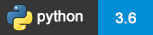
<style>
.page{position:relative;width:153px;height:35px;background:#363636}
.page>*{position:absolute;margin:0}
.t1{font:15px "ArialMT";letter-spacing:-0.01em;color:#ffffff;font-weight:bold}
</style>
<div class="page">
<p class="t1" style="left:37px;top:10px;width:46px;height:15px">python</p>
<p class="t1" style="left:115px;top:12px;width:21px;height:12px">3.6</p>
</div>
